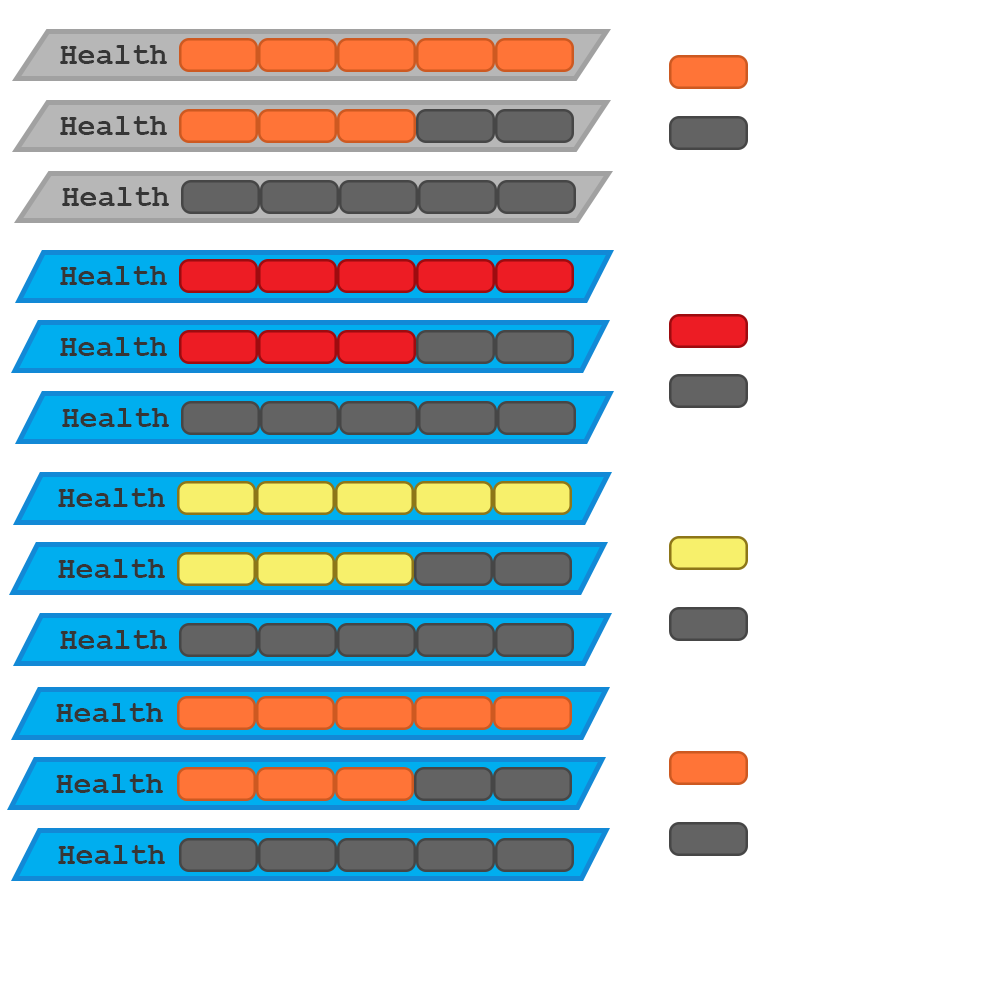
<style>
.page{position:relative;width:1000px;height:1000px;background:#ffffff}
.page>*{position:absolute;margin:0}
.t1{font:30px "CourierNewPS-BoldMT";color:#363636}
</style>
<div class="page">
<p class="t1" style="left:60px;top:45px;width:107px;height:19px">Health</p>
<p class="t1" style="left:60px;top:116px;width:107px;height:19px">Health</p>
<p class="t1" style="left:62px;top:187px;width:107px;height:19px">Health</p>
<p class="t1" style="left:60px;top:266px;width:107px;height:19px">Health</p>
<p class="t1" style="left:60px;top:337px;width:107px;height:19px">Health</p>
<p class="t1" style="left:62px;top:408px;width:107px;height:19px">Health</p>
<p class="t1" style="left:58px;top:488px;width:107px;height:19px">Health</p>
<p class="t1" style="left:58px;top:559px;width:107px;height:19px">Health</p>
<p class="t1" style="left:60px;top:630px;width:107px;height:19px">Health</p>
<p class="t1" style="left:56px;top:703px;width:107px;height:19px">Health</p>
<p class="t1" style="left:56px;top:774px;width:107px;height:19px">Health</p>
<p class="t1" style="left:58px;top:845px;width:107px;height:19px">Health</p>
</div>
